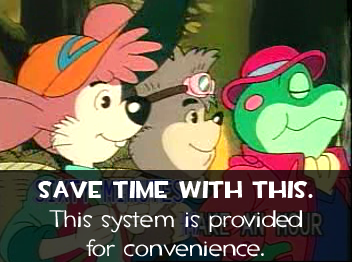
<style>
.page{position:relative;width:352px;height:262px}
.page>*{position:absolute;margin:0}
.t1{font:24px "TF2Secondary";color:#ffffff}
.t2{font:24px "TF2Build";color:#ffffff}
</style>
<div class="page">
<p class="t1" style="left:38px;top:181px;width:275px;height:76px;text-align:center"><span class="t2">SAVE TIME WITH THIS.<br></span>This system is provided<br>for convenience.</p>
</div>
